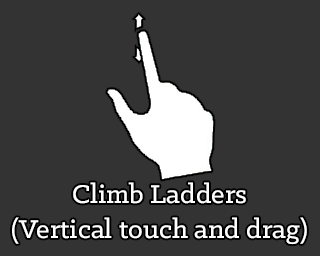
<style>
.page{position:relative;width:320px;height:256px;background:#333333}
.page>*{position:absolute;margin:0}
.t1{font:29.2px "KlinicSlab-Medium";color:#ffffff}
</style>
<div class="page">
<p class="t1" style="left:12px;top:182px;width:295px;height:63px;text-align:center">Climb Ladders<br>(Vertical touch and drag)</p>
</div>
